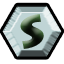
<style>
.page{position:relative;width:64px;height:64px;background:#ffffff}
.page>*{position:absolute;margin:0}
.t1{font:48px "LithosPro-Black"}
</style>
<div class="page">
<p class="t1" style="left:20px;top:14px;width:24px;height:35px">S</p>
</div>
